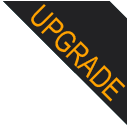
<style>
.page{position:relative;width:128px;height:128px;background:#ffffff}
.page>*{position:absolute;margin:0}
.t1{font:30px "ArialMT";color:#ffa200;scale:0.8 1}
</style>
<div class="page">
<p class="t1" style="left:31px;top:4px;width:95px;height:98px;rotate:45deg">UPGRADE</p>
</div>
